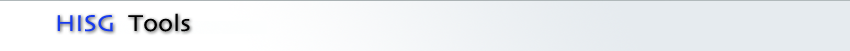
<style>
.page{position:relative;width:850px;height:51px;background:#e6ebef}
.page>*{position:absolute;margin:0}
.t1{font:24px "Skia-Regular";color:#000000;scale:1.1 1}
.t2{font:24px "Skia-Regular";color:#183bee;scale:1.1 1}
</style>
<div class="page">
<p class="t1" style="left:57px;top:13px;width:133px;height:19px"><span class="t2">HISG  </span>Tools</p>
</div>
